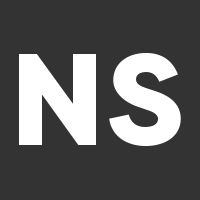
<style>
.page{position:relative;width:200px;height:200px;background:#333333}
.page>*{position:absolute;margin:0}
.t1{font:130px "FilsonProHeavy";color:#ffffff}
</style>
<div class="page">
<p class="t1" style="left:19px;top:53px;width:162px;height:93px">NS</p>
</div>
